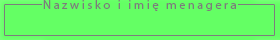
<style>
.page{position:relative;width:280px;height:40px;background:#64ff64}
.page>*{position:absolute;margin:0}
.t1{font:12.5px "MyriadPro-Regular";letter-spacing:0.2em;color:#7c7c7c}
</style>
<div class="page">
<p class="t1" style="left:43px;top:0px;width:193px;height:11px">Nazwisko i imię menagera</p>
</div>
